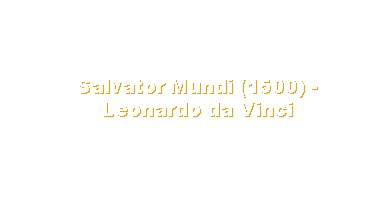
<style>
.page{position:relative;width:391px;height:200px;background:#ffffff}
.page>*{position:absolute;margin:0}
.t1{font:19px "Arial-Black";color:#ffffff}
</style>
<div class="page">
<p class="t1" style="left:79px;top:80px;width:239px;height:37px;text-align:center">Salvator Mundi (1500) - Leonardo da Vinci</p>
</div>
